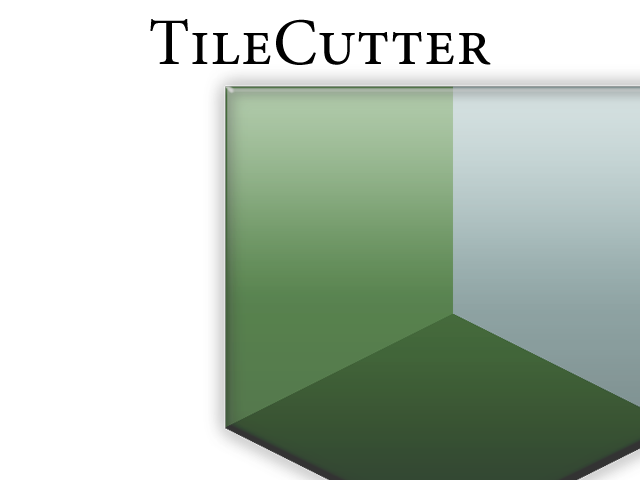
<style>
.page{position:relative;width:640px;height:480px;background:#ffffff}
.page>*{position:absolute;margin:0}
.t1{font:66.7px "MinionPro-Regular";color:#000000;font-variant:small-caps}
</style>
<div class="page">
<p class="t1" style="left:150px;top:19px;width:341px;height:46px">TileCutter</p>
</div>
